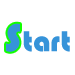
<style>
.page{position:relative;width:75px;height:75px;background:#ffffff}
.page>*{position:absolute;margin:0}
.t1{font:40px "Bauhaus93";letter-spacing:0.075em;color:#3693d9}
.t2{font:30px "Bauhaus93";letter-spacing:0.075em;color:#3693d9}
</style>
<div class="page">
<p class="t1" style="left:6px;top:23px;width:14px;height:29px">S</p>
<p class="t2" style="left:23px;top:31px;width:47px;height:21px">tart</p>
</div>
